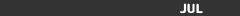
<style>
.page{position:relative;width:240px;height:16px;background:#333333}
.page>*{position:absolute;margin:0}
.t1{font:12.5px "RoundedMplus1c-ExtraBold";color:#ffffff}
</style>
<div class="page">
<p class="t1" style="left:180px;top:3px;width:23px;height:11px">JUL</p>
</div>
